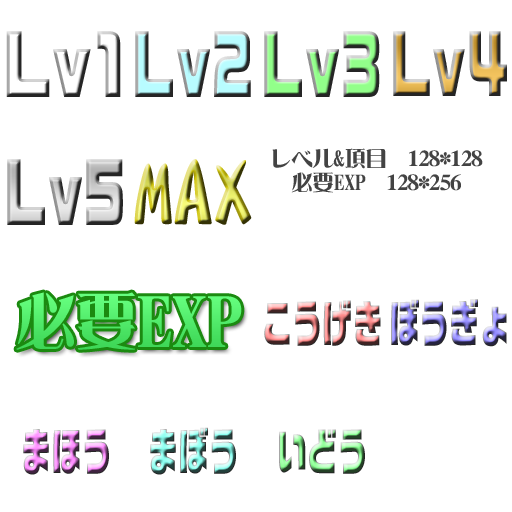
<style>
.page{position:relative;width:512px;height:512px;background:#ffffff}
.page>*{position:absolute;margin:0}
.t1{font:74.7px "RFGSanSrf-U-83pv-RKSJ-H";font-weight:bold;scale:0.7 1}
.t2{font:74.7px "RFGSanSrf-U-83pv-RKSJ-H";font-weight:bold;scale:0.62 1}
.t3{font:74.7px "RFGSanSrf-U-83pv-RKSJ-H";scale:0.62 1}
.t4{font:21.2px/23.6px "DFLeiGaSo-W9-WIN-RKSJ-H";color:#434343}
.t5{font:85.6px "DFFuun-W12-WIN-RKSJ-H";scale:0.94 1}
.t6{font:70.2px "DFLeiGaSo-W9-WIN-RKSJ-H";color:#55ee6e}
.t7{font:60.8px "DFLeiGaSo-W9-WIN-RKSJ-H";color:#55ee6e}
.t8{font:48.7px "RFGSanSrf-U-83pv-RKSJ-H";scale:0.62 1}
</style>
<div class="page">
<p class="t1" style="left:6px;top:31px;width:115px;height:66px">Lv1</p>
<p class="t2" style="left:135px;top:31px;width:116px;height:66px">Lv2</p>
<p class="t2" style="left:264px;top:31px;width:116px;height:66px">Lv3</p>
<p class="t3" style="left:393px;top:31px;width:114px;height:65px">Lv4</p>
<p class="t4" style="left:272px;top:148px;width:211px;height:45px;text-align:center">レベル&amp;項目　128*128<br>必要EXP　128*256</p>
<p class="t2" style="left:7px;top:159px;width:116px;height:66px">Lv5</p>
<p class="t5" style="left:134px;top:159px;width:118px;height:66px">MAX</p>
<p class="t6" style="left:16px;top:292px;width:226px;height:58px"><span class="t7">必要</span>EXP</p>
<p class="t8" style="left:264px;top:300px;width:117px;height:46px">こうげき</p>
<p class="t8" style="left:391px;top:299px;width:116px;height:48px">ぼうぎょ</p>
<p class="t8" style="left:23px;top:429px;width:86px;height:46px">まほう</p>
<p class="t8" style="left:150px;top:427px;width:86px;height:48px">まぼう</p>
<p class="t8" style="left:279px;top:429px;width:86px;height:45px">いどう</p>
</div>
